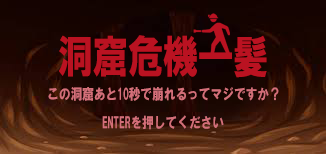
<style>
.page{position:relative;width:326px;height:154px}
.page>*{position:absolute;margin:0}
.t1{font:45px "HGSoeiKakugothicUB";letter-spacing:-0.025em;color:#ba1221;font-variant:small-caps;scale:0.8 1}
.t2{font:15px "HGSoeiKakugothicUB";letter-spacing:-0.025em;color:#d46f79;font-variant:small-caps;scale:0.8 1}
</style>
<div class="page">
<p class="t1" style="left:59px;top:35px;width:208px;height:43px">洞窟危機一髪</p>
<p class="t2" style="left:48px;top:87px;width:231px;height:14px">この洞窟あと10秒で崩れるってマジですか？</p>
<p class="t2" style="left:102px;top:115px;width:122px;height:15px">ENTERを押してください</p>
</div>
